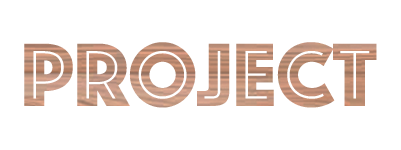
<style>
.page{position:relative;width:401px;height:150px;background:#ffffff}
.page>*{position:absolute;margin:0}
.t1{font:93.4px "Phosphate-Inline";color:#c09079}
</style>
<div class="page">
<p class="t1" style="left:24px;top:42px;width:353px;height:66px">project</p>
</div>
